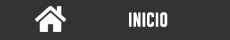
<style>
.page{position:relative;width:230px;height:40px;background:#333333}
.page>*{position:absolute;margin:0}
.t1{font:16.4px "Gobold";color:#ffffff;scale:1.04 1}
</style>
<div class="page">
<p class="t1" style="left:129px;top:12px;width:39px;height:15px">inicio</p>
</div>
